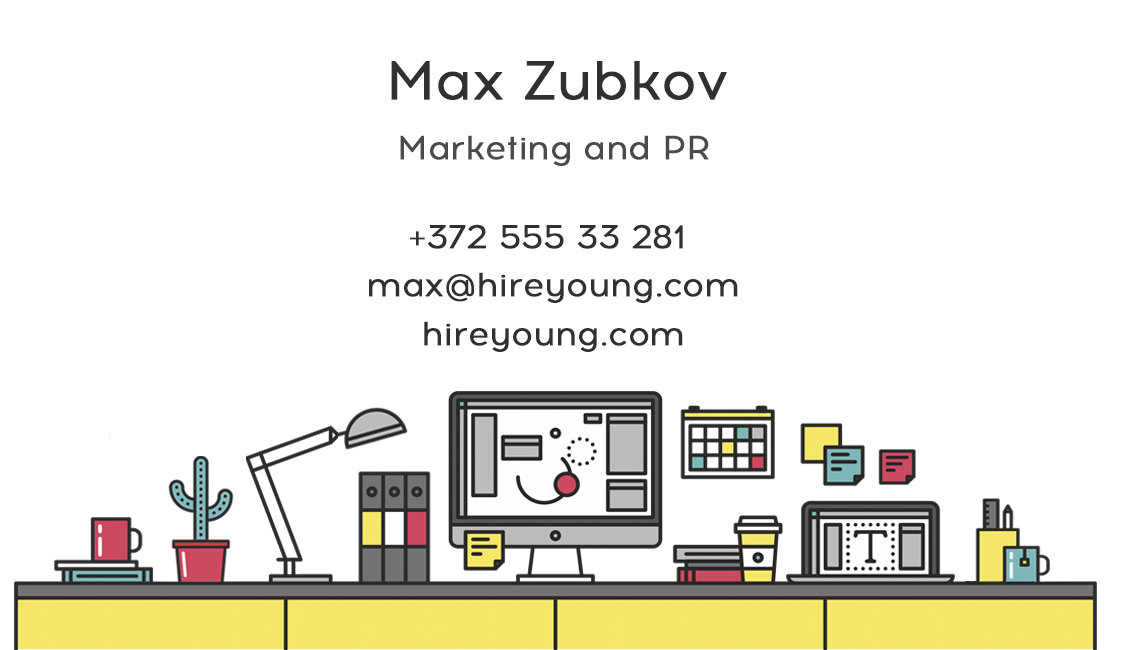
<style>
.page{position:relative;width:1122px;height:650px;background:#ffffff}
.page>*{position:absolute;margin:0}
.t1{font:54.2px "Acrom-Regular";letter-spacing:-0.01em;color:#303030;font-weight:bold}
.t2{font:33.3px "Acrom-Regular";letter-spacing:-0.01em;color:#4a4a4a;font-weight:bold}
.t3{font:33.4px "Acrom-Regular";letter-spacing:-0.01em;color:#303030;font-weight:bold}
.t4{font:33.3px "Acrom-Regular";letter-spacing:-0.01em;color:#303030;font-weight:bold}
</style>
<div class="page">
<p class="t1" style="left:391px;top:61px;width:336px;height:39px">Max Zubkov</p>
<p class="t2" style="left:400px;top:135px;width:309px;height:31px">Marketing and PR</p>
<p class="t3" style="left:410px;top:224px;width:273px;height:25px">+372 555 33 281</p>
<p class="t4" style="left:369px;top:272px;width:369px;height:31px">max@hireyoung.com</p>
<p class="t4" style="left:424px;top:321px;width:259px;height:31px">hireyoung.com</p>
</div>
